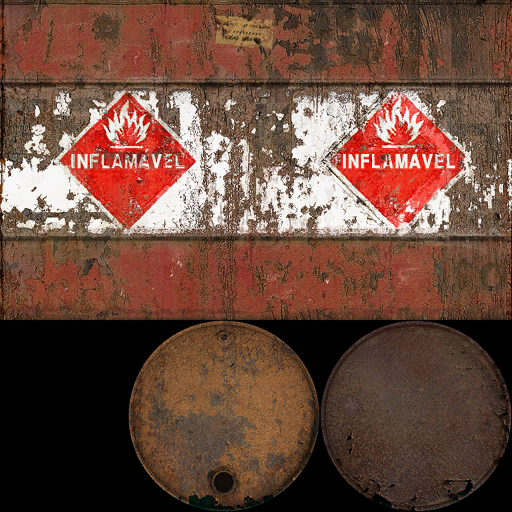
<style>
.page{position:relative;width:512px;height:512px}
.page>*{position:absolute;margin:0}
.t1{font:18.2px "Helvetica-Narrow-Bold";letter-spacing:0.02em;color:#eac2c1;font-weight:bold}
.t2{font:18.2px "Helvetica-Narrow-Bold";letter-spacing:0.02em;color:#ebbfbf;font-weight:bold}
.t3{font:19.1px "Helvetica-Narrow-Bold";letter-spacing:0.02em;font-weight:bold;scale:1.05 1}
.t4{font:19.1px "Helvetica-Narrow-Bold";letter-spacing:0.02em;color:#eff3e7;font-weight:bold;scale:1.05 1}
</style>
<div class="page">
<p class="t1" style="left:145px;top:149px;width:4px;height:4px">´</p>
<p class="t2" style="left:415px;top:149px;width:4px;height:4px">´</p>
<p class="t3" style="left:72px;top:154px;width:113px;height:15px">INFLAMAVEL</p>
<p class="t4" style="left:343px;top:154px;width:113px;height:15px">INFLAMAVEL</p>
</div>
